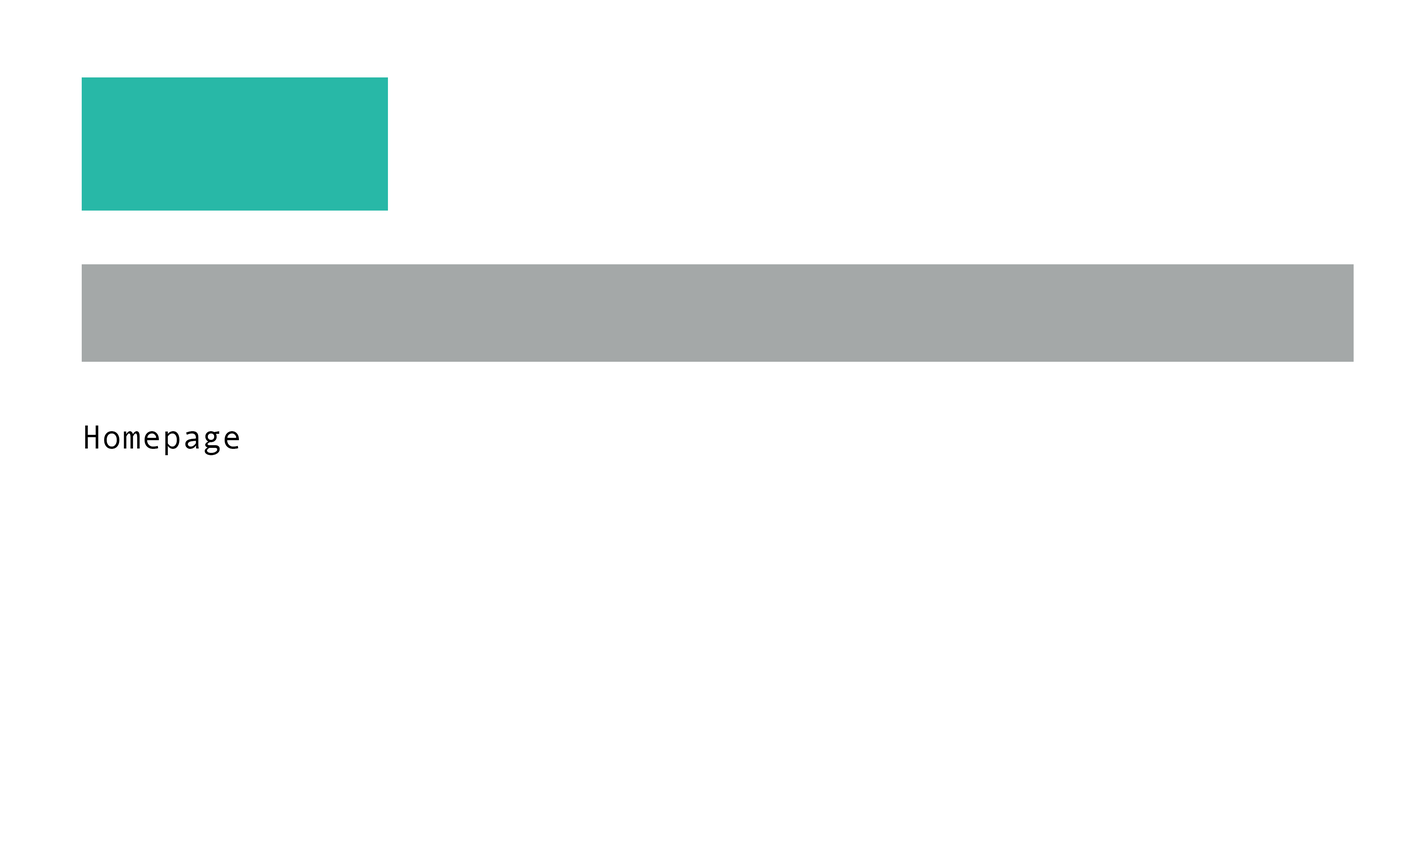
<style>
.page{position:relative;width:1401px;height:851px;background:#ffffff}
.page>*{position:absolute;margin:0}
.t1{font:33.4px "AndaleMono";color:#000000}
</style>
<div class="page">
<p class="t1" style="left:85px;top:425px;width:154px;height:30px">Homepage</p>
</div>
